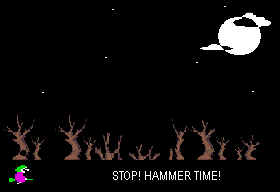
<style>
.page{position:relative;width:280px;height:192px;background:#000000}
.page>*{position:absolute;margin:0}
.t1{font:12px "ArialNarrow";color:#ffffff}
</style>
<div class="page">
<p class="t1" style="left:113px;top:171px;width:107px;height:9px">STOP! HAMMER TIME!</p>
</div>
